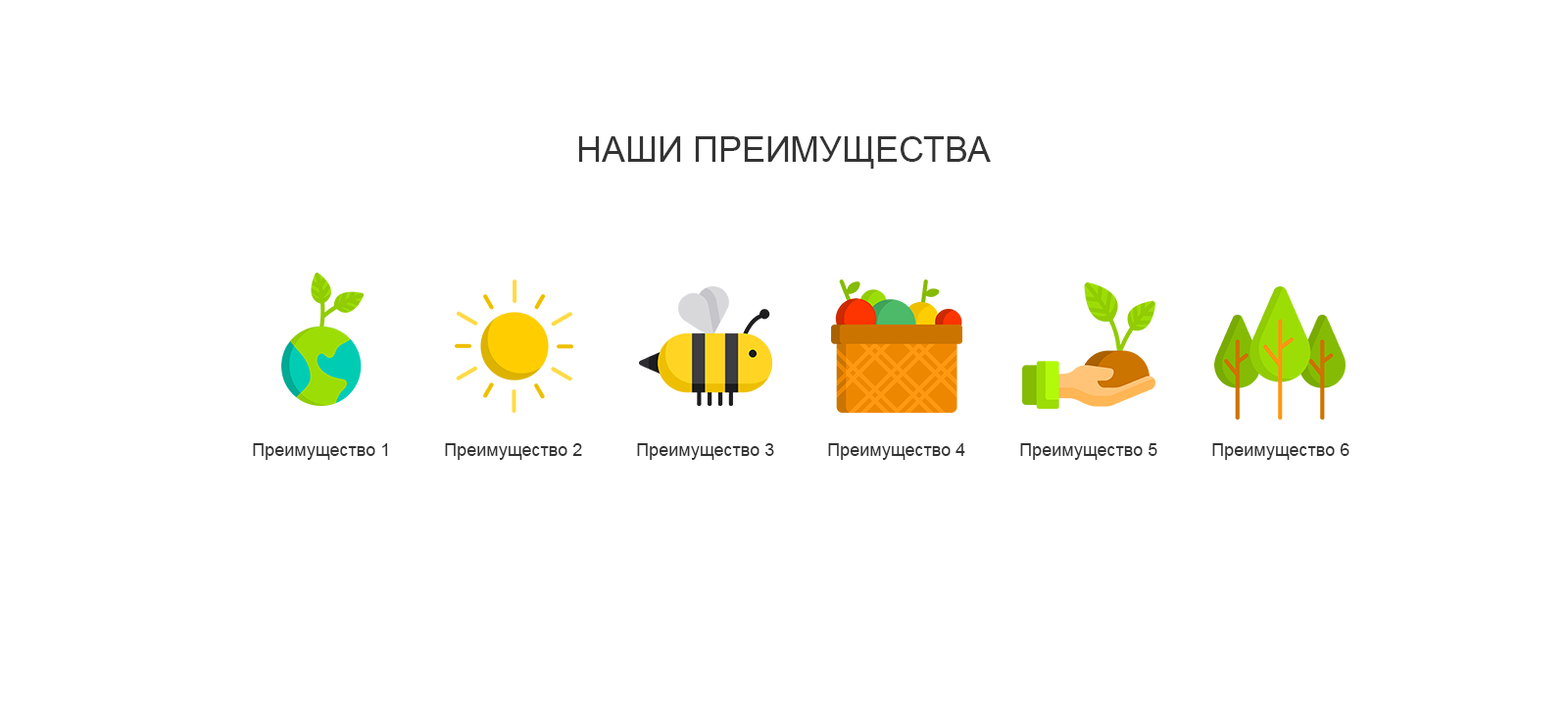
<style>
.page{position:relative;width:1568px;height:706px;background:#ffffff}
.page>*{position:absolute;margin:0}
.t1{font:35.3px "ArialMT";color:#333333;text-transform:uppercase}
.t2{font:17.6px "ArialMT";color:#333333}
</style>
<div class="page">
<p class="t1" style="left:578px;top:136px;width:413px;height:33px">Наши преимущества</p>
<p class="t2" style="left:253px;top:443px;width:135px;height:17px">Преимущество 1</p>
<p class="t2" style="left:445px;top:443px;width:137px;height:17px">Преимущество 2</p>
<p class="t2" style="left:637px;top:443px;width:137px;height:17px">Преимущество 3</p>
<p class="t2" style="left:828px;top:443px;width:137px;height:17px">Преимущество 4</p>
<p class="t2" style="left:1020px;top:443px;width:137px;height:17px">Преимущество 5</p>
<p class="t2" style="left:1212px;top:443px;width:137px;height:17px">Преимущество 6</p>
</div>
